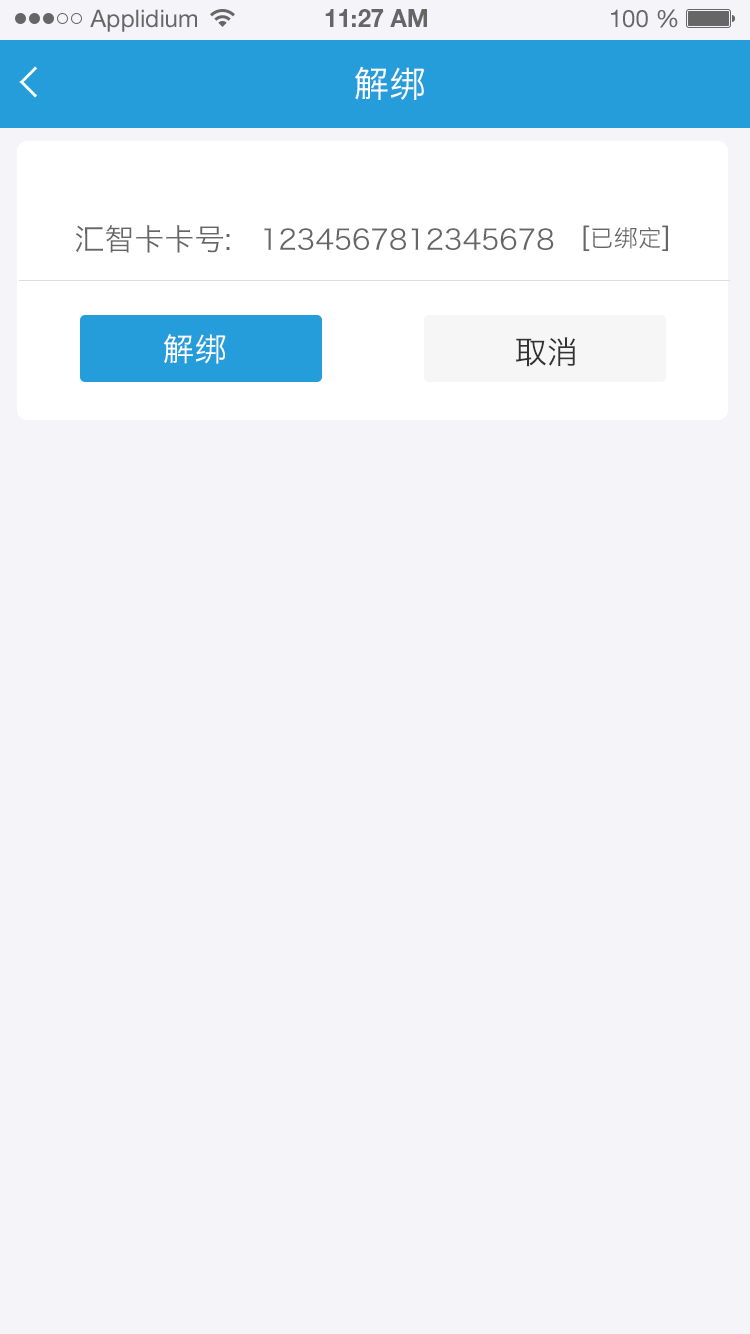
<style>
.page{position:relative;width:750px;height:1334px;background:#f5f4f9}
.page>*{position:absolute;margin:0}
.t1{font:24px "HelveticaNeueLTStd-Roman";color:#666666}
.t2{font:24px "HelveticaNeueLTStd-Bd";color:#666666}
.t3{font:36px "HiraginoSansGB-W3";color:#ffffff;text-transform:uppercase}
.t4{font:30px "HiraginoSansGB-W3";color:#666666;text-transform:uppercase}
.t5{font:28px "HiraginoSansGB-W3";color:#666666;text-transform:uppercase}
.t6{font:24px "HiraginoSansGB-W3";color:#666666;text-transform:uppercase}
.t7{font:32px "HiraginoSansGB-W3";color:#ffffff;text-transform:uppercase}
.t8{font:32px "HiraginoSansGB-W3";color:#333333;text-transform:uppercase}
</style>
<div class="page">
<p class="t1" style="left:90px;top:9px;width:107px;height:23px">Applidium</p>
<p class="t2" style="left:325px;top:9px;width:102px;height:18px">11:27 AM</p>
<p class="t1" style="left:611px;top:9px;width:67px;height:19px">100 %</p>
<p class="t3" style="left:355px;top:66px;width:70px;height:34px">解绑</p>
<p class="t4" style="left:75px;top:225px;width:155px;height:28px">汇智卡卡号:</p>
<p class="t5" style="left:264px;top:228px;width:290px;height:22px">1234567812345678</p>
<p class="t6" style="left:583px;top:225px;width:85px;height:26px"><span class="t5">[</span>已绑定<span class="t5">]</span></p>
<p class="t7" style="left:163px;top:334px;width:63px;height:30px">解绑</p>
<p class="t8" style="left:515px;top:337px;width:60px;height:30px">取消</p>
</div>
